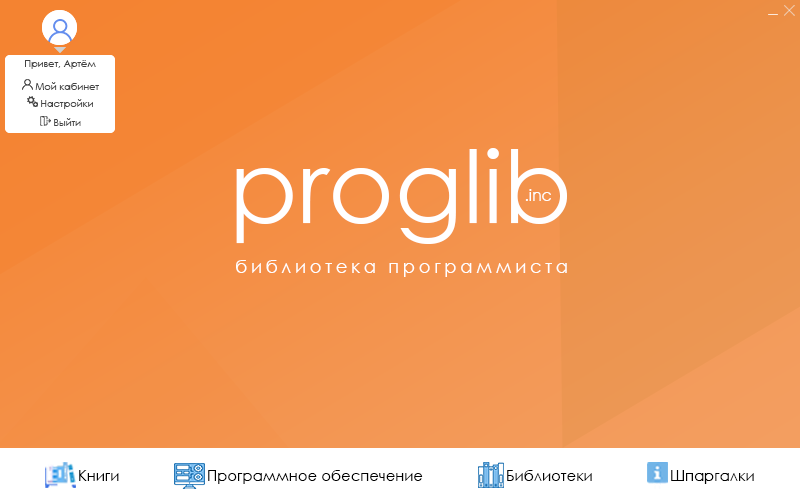
<style>
.page{position:relative;width:800px;height:500px}
.page>*{position:absolute;margin:0}
.t1{font:9.7px "CenturyGothic";color:#434343}
.t2{font:101.3px "CenturyGothic";color:#ffffff}
.t3{font:15.6px "CenturyGothic";color:#ffffff}
.t4{font:18.1px "CenturyGothic";letter-spacing:0.2em;color:#ffffff}
.t5{font:14.9px "CenturyGothic";color:#000000}
</style>
<div class="page">
<p class="t1" style="left:25px;top:60px;width:71px;height:9px">Привет, Артём</p>
<p class="t1" style="left:25px;top:60px;width:71px;height:9px">Привет, Артём</p>
<p class="t1" style="left:35px;top:82px;width:64px;height:8px">Мой кабинет</p>
<p class="t1" style="left:35px;top:82px;width:64px;height:8px">Мой кабинет</p>
<p class="t1" style="left:41px;top:99px;width:52px;height:10px">Настройки</p>
<p class="t1" style="left:41px;top:99px;width:52px;height:10px">Настройки</p>
<p class="t1" style="left:54px;top:118px;width:27px;height:8px">Выйти</p>
<p class="t1" style="left:54px;top:118px;width:27px;height:8px">Выйти</p>
<p class="t2" style="left:236px;top:148px;width:331px;height:96px">proglib</p>
<p class="t3" style="left:525px;top:189px;width:26px;height:12px">.inc</p>
<p class="t4" style="left:236px;top:260px;width:331px;height:17px">библиотека программиста</p>
<p class="t5" style="left:79px;top:470px;width:40px;height:11px">Книги</p>
<p class="t5" style="left:208px;top:470px;width:215px;height:14px">Программное обеспечение</p>
<p class="t5" style="left:507px;top:470px;width:85px;height:11px">Библиотеки</p>
<p class="t5" style="left:671px;top:470px;width:83px;height:14px">Шпаргалки</p>
</div>
